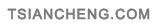
<style>
.page{position:relative;width:158px;height:25px;background:#ffffff}
.page>*{position:absolute;margin:0}
.t1{font:14px "ArialMT";letter-spacing:0.05em;color:#7a7a7a;text-transform:uppercase;font-weight:bold}
</style>
<div class="page">
<p class="t1" style="left:7px;top:8px;width:143px;height:12px">tsiancheng.com</p>
</div>
